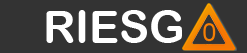
<style>
.page{position:relative;width:247px;height:53px;background:#333333}
.page>*{position:absolute;margin:0}
.t1{font:45px "ArialRoundedMTBold";color:#ffffff}
</style>
<div class="page">
<p class="t1" style="left:46px;top:10px;width:136px;height:33px">RIESG</p>
</div>
